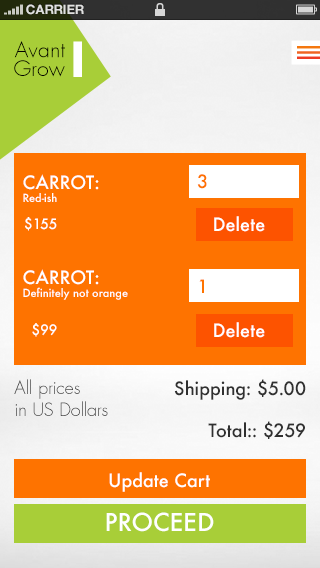
<style>
.page{position:relative;width:320px;height:568px;background:#fe7300}
.page>*{position:absolute;margin:0}
.t1{font:13px "HelveticaNeue-Bold";color:#dfe0de;text-transform:uppercase}
.t2{font:21px/18.7px "FuturaLight";color:#000000}
.t3{font:18px "Futura-Medium";color:#ffffff}
.t4{font:11px "Futura-Medium";color:#ffffff}
.t5{font:18px "Futura-Medium";color:#fe7300}
.t6{font:14px "Futura-Medium";color:#ffffff}
.t7{font:18px "FuturaLight"}
.t8{font:18px "Futura-Medium";color:#303030}
.t9{font:24px "Futura-Medium";color:#ffffff}
</style>
<div class="page">
<p class="t1" style="left:26px;top:4px;width:58px;height:11px">CARRIER</p>
<p class="t2" style="left:14px;top:41px;width:51px;height:36px;text-align:right">Avant<br>Grow</p>
<p class="t3" style="left:23px;top:174px;width:76px;height:28px">CARROT:<br><span class="t4">Red-ish</span></p>
<p class="t5" style="left:197px;top:174px;width:10px;height:15px">3</p>
<p class="t6" style="left:25px;top:217px;width:32px;height:14px">$155</p>
<p class="t3" style="left:214px;top:216px;width:51px;height:16px">Delete</p>
<p class="t4" style="left:23px;top:269px;width:105px;height:31px"><span class="t3">CARROT:</span> <br>Definitely not orange</p>
<p class="t5" style="left:199px;top:279px;width:5px;height:14px">1</p>
<p class="t6" style="left:32px;top:323px;width:25px;height:14px">$99</p>
<p class="t3" style="left:214px;top:322px;width:51px;height:16px">Delete</p>
<p class="t7" style="left:14px;top:379px;width:94px;height:37px">All prices<br>in US Dollars</p>
<p class="t8" style="left:174px;top:379px;width:132px;height:21px">Shipping: $5.00</p>
<p class="t8" style="left:208px;top:421px;width:97px;height:18px">Total:: $259</p>
<p class="t3" style="left:109px;top:472px;width:101px;height:20px">Update Cart</p>
<p class="t9" style="left:106px;top:512px;width:108px;height:20px">PROCEED</p>
</div>
